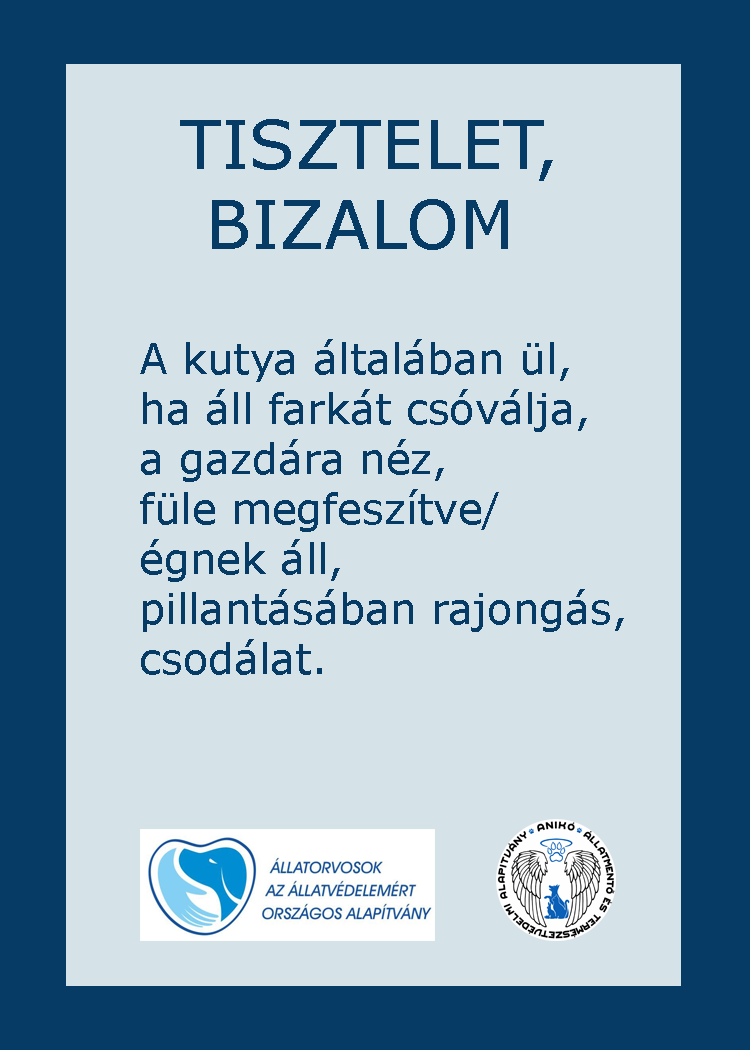
<style>
.page{position:relative;width:750px;height:1050px;background:#d5e2e7}
.page>*{position:absolute;margin:0}
.t1{font:66.7px "Verdana";color:#053b65}
.t2{font:66.7px "GravitateBRK";color:#053b65}
.t3{font:41.7px "Verdana";color:#053b65}
</style>
<div class="page">
<p class="t1" style="left:180px;top:119px;width:373px;height:131px;text-align:center"><span class="t2">         </span>TISZTELET,<br>            BIZALOM</p>
<p class="t3" style="left:140px;top:339px;width:484px;height:336px">A kutya általában ül,<br>ha áll farkát csóválja,<br>a gazdára néz,<br>füle megfeszítve/<br>égnek áll,<br>pillantásában rajongás,<br>csodálat.</p>
</div>
